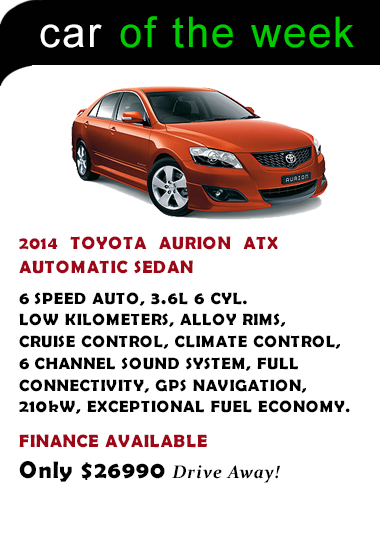
<style>
.page{position:relative;width:380px;height:540px;background:#ffffff}
.page>*{position:absolute;margin:0}
.t1{font:42.3px "ArialMT";letter-spacing:0.05em;color:#00cd00}
.t2{font:42.3px "ArialMT";letter-spacing:0.05em;color:#ffffff}
.t3{font:18px/24.1px "BerlinSansFBDemi-Bold";letter-spacing:0.05em;color:#9f0618}
.t4{font:16.3px/21.7px "BerlinSansFBDemi-Bold";letter-spacing:0.05em;color:#000000}
.t5{font:18px/21.7px "BerlinSansFBDemi-Bold";letter-spacing:0.05em;color:#000000}
.t6{font:18px "BerlinSansFBDemi-Bold";letter-spacing:0.05em;color:#9f0618}
.t7{font:24px "BerlinSansFBDemi-Bold";letter-spacing:0.05em;color:#020202}
.t8{font:18.1px "Constantia-BoldItalic";letter-spacing:0.05em;color:#020202}
</style>
<div class="page">
<p class="t1" style="left:120px;top:16px;width:234px;height:32px">of the week</p>
<p class="t2" style="left:40px;top:24px;width:62px;height:24px">car</p>
<p class="t3" style="left:19px;top:236px;width:259px;height:38px">2014  TOYOTA  AURION  ATX<br>AUTOMATIC SEDAN</p>
<p class="t4" style="left:19px;top:292px;width:331px;height:122px"><span class="t5">6</span> SPEED AUTO, <span class="t5">3.6</span>L <span class="t5">6</span> CYL.<br>LOW KILOMETERS, ALLOY RIMS,<br>CRUISE CONTROL, CLIMATE CONTROL,<br><span class="t5">6</span> CHANNEL SOUND SYSTEM, FULL <br>CONNECTIVITY, GPS NAVIGATION,<br><span class="t5">210</span>kW, EXCEPTIONAL FUEL ECONOMY.</p>
<p class="t6" style="left:19px;top:434px;width:188px;height:14px">FINANCE AVAILABLE</p>
<p class="t7" style="left:19px;top:461px;width:262px;height:22px">Only $26990 <span class="t8">Drive Away!</span></p>
</div>
